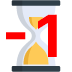
<style>
.page{position:relative;width:72px;height:72px;background:#ffffff}
.page>*{position:absolute;margin:0}
.t1{font:58.3px "Inter-Bold";letter-spacing:0.1em;color:#ff0000}
</style>
<div class="page">
<p class="t1" style="left:6px;top:14px;width:51px;height:43px">-1</p>
</div>
